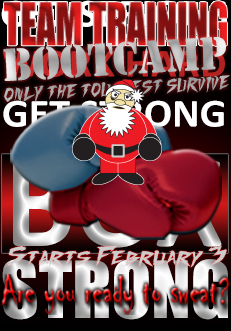
<style>
.page{position:relative;width:231px;height:331px}
.page>*{position:absolute;margin:0}
.t1{font:40px/50px "Calibri-Bold";text-transform:uppercase;scale:1.05 1}
.t2{font:15.8px/21px "FightingSpiritturbo";scale:0.86 1}
.t3{font:43px/113.5px "StencilStd";scale:0.91 1}
.t4{font:132.8px "Calibri-Bold";text-transform:uppercase;scale:0.94 1}
.t5{font:21.3px "FightingSpiritturbo";color:#cccccc;scale:1.1 1}
.t6{font:72.7px "Impact";text-transform:uppercase}
</style>
<div class="page">
<p class="t1" style="left:1px;top:0px;width:226px;height:127px;text-align:center">GET SERIOUS<br>work hard<br>GET strong</p>
<p class="t2" style="left:3px;top:37px;width:227px;height:66px;text-align:center;rotate:-3deg"><span class="t3">BOOTCAMP<br></span>ONLY THE TOUGHEST SURVIVE</p>
<p class="t4" style="left:13px;top:160px;width:209px;height:88px">box</p>
<p class="t5" style="left:7px;top:245px;width:220px;height:23px">Starts February 3</p>
<p class="t6" style="left:2px;top:259px;width:226px;height:61px">strong</p>
</div>
